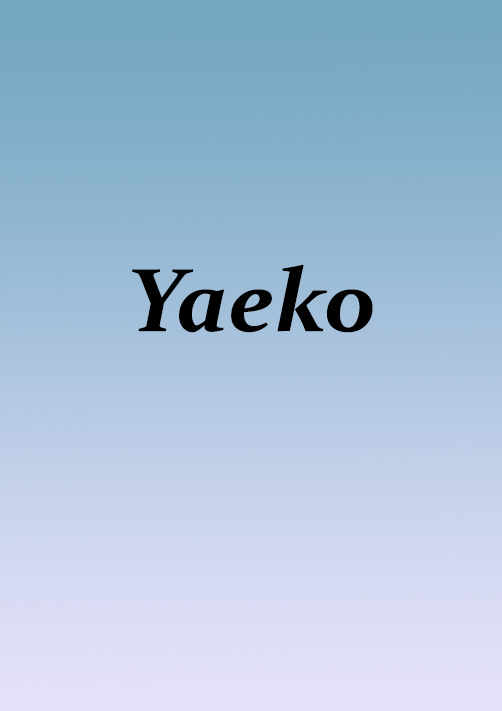
<style>
.page{position:relative;width:502px;height:711px}
.page>*{position:absolute;margin:0}
.t1{font:90px "Constantia-BoldItalic";color:#010101}
</style>
<div class="page">
<p class="t1" style="left:132px;top:264px;width:241px;height:69px">Yaeko</p>
</div>
